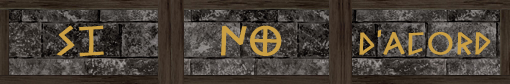
<style>
.page{position:relative;width:510px;height:84px}
.page>*{position:absolute;margin:0}
.t1{font:43.6px "Alfabetix";color:#ca9f43;font-weight:bold}
.t2{font:32.6px "Alfabetix";color:#ca9f43;font-weight:bold}
</style>
<div class="page">
<p class="t1" style="left:56px;top:25px;width:48px;height:32px">sI</p>
<p class="t1" style="left:221px;top:25px;width:61px;height:31px">NO</p>
<p class="t2" style="left:359px;top:30px;width:132px;height:26px">d’AcorD</p>
</div>
